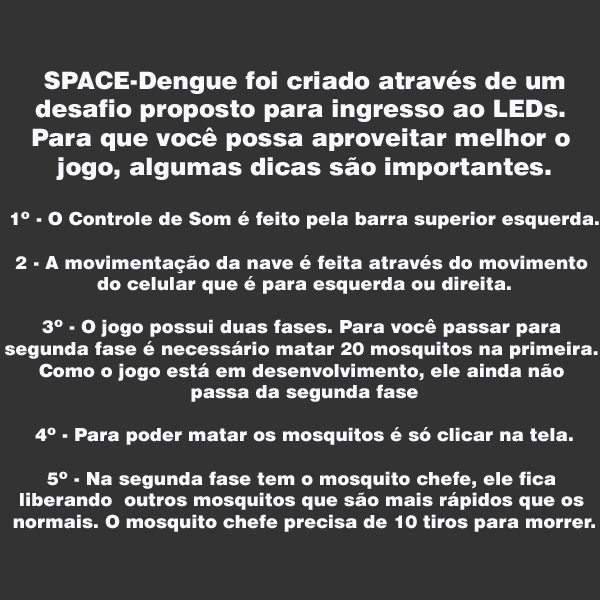
<style>
.page{position:relative;width:600px;height:600px;background:#333333}
.page>*{position:absolute;margin:0}
.t1{font:18px "Swiss721BT-Black";color:#f9f9fc}
.t2{font:24px "Swiss721BT-Black";color:#f9f9fc}
</style>
<div class="page">
<p class="t1" style="left:5px;top:70px;width:594px;height:462px;text-align:center"><span class="t2">SPACE-Dengue foi criado através de um<br>desafio proposto para ingresso ao LEDs. <br>Para que você possa aproveitar melhor o <br>jogo, algumas dicas são importantes.<br><br></span>1º - O Controle de Som é feito pela barra superior esquerda.<br><br>2 - A movimentação da nave é feita através do movimento <br>do celular que é para esquerda ou direita.<br><br>3º - O jogo possui duas fases. Para você passar para <br>segunda fase é necessário matar 20 mosquitos na primeira. <br>Como o jogo está em desenvolvimento, ele ainda não <br>passa da segunda fase<br><br>4º - Para poder matar os mosquitos é só clicar na tela.<br> <br>5º - Na segunda fase tem o mosquito chefe, ele fica <br>liberando  outros mosquitos que são mais rápidos que os <br>normais. O mosquito chefe precisa de 10 tiros para morrer.</p>
</div>
